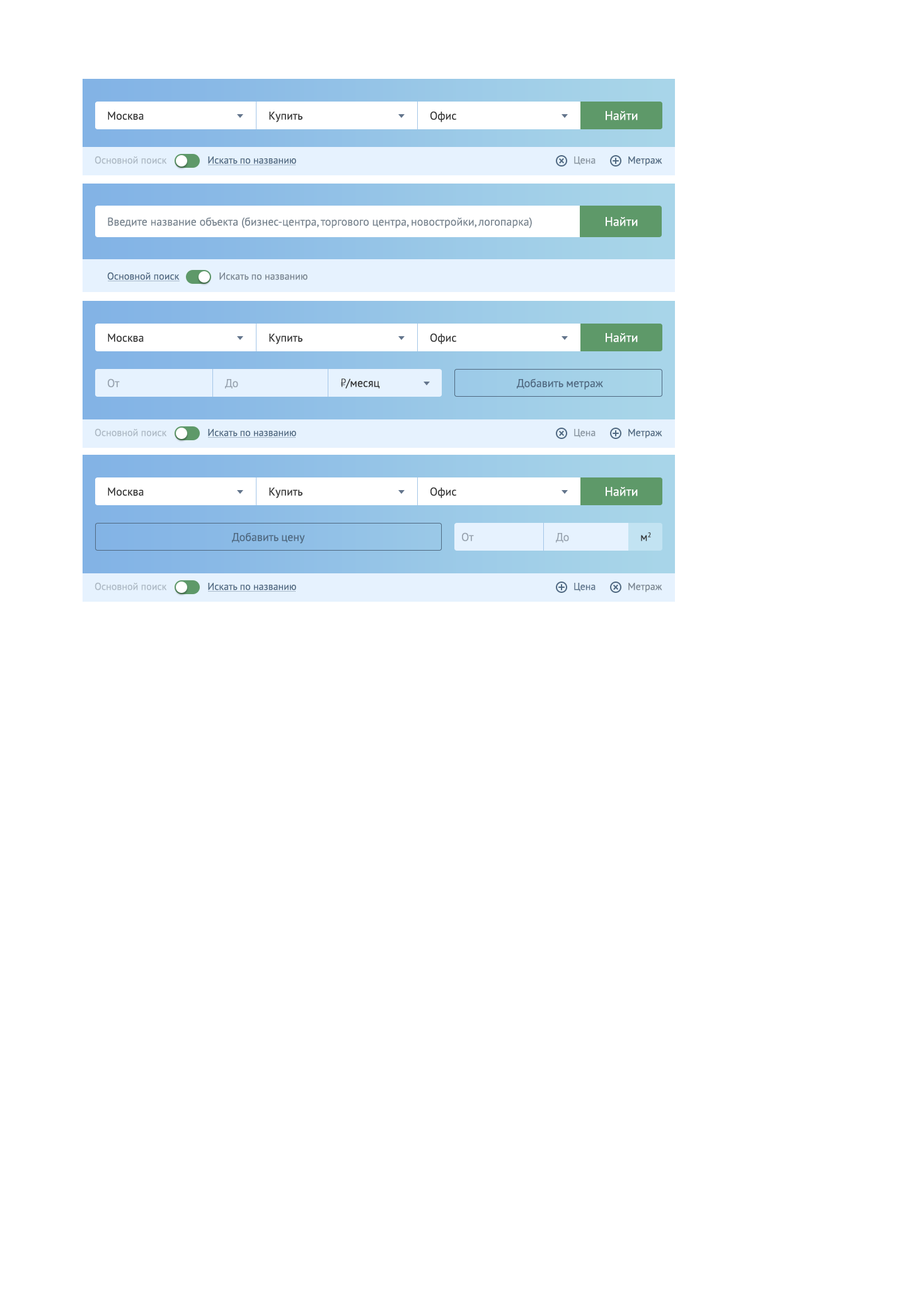
<style>
.page{position:relative;width:922px;height:1293px;background:#ffffff}
.page>*{position:absolute;margin:0}
.t1{font:11.3px "PTSans-Regular";color:#333333}
.t2{font:12.6px "PTSans-Regular";color:#ffffff}
.t3{font:10.1px "PTSans-Regular";color:#adb9c4}
.t4{font:10.1px "PTSans-Regular";color:#506981}
.t5{font:10.1px "PTSans-Regular";color:#88949f}
.t6{font:11.3px "PTSans-Regular";color:#798590}
.t7{font:10.1px "PTSans-Regular";color:#798590}
.t8{font:11.3px "PTSans-Regular";color:#98a3af}
.t9{font:11.3px "PTRoubleSans";color:#333333}
.t10{font:11.3px "PTSans-Regular";color:#506981}
.t11{font:10.1px "PTSans-Regular";color:#5c738a}
</style>
<div class="page">
<p class="t1" style="left:108px;top:112px;width:36px;height:8px">Москва</p>
<p class="t1" style="left:269px;top:112px;width:34px;height:10px">Купить</p>
<p class="t1" style="left:431px;top:111px;width:26px;height:11px">Офис</p>
<p class="t2" style="left:606px;top:111px;width:32px;height:9px">Найти</p>
<p class="t3" style="left:95px;top:156px;width:72px;height:8px">Основной поиск</p>
<p class="t4" style="left:208px;top:156px;width:88px;height:8px">Искать по названию</p>
<p class="t5" style="left:574px;top:156px;width:22px;height:9px">Цена</p>
<p class="t4" style="left:629px;top:156px;width:34px;height:10px">Метраж</p>
<p class="t6" style="left:108px;top:217px;width:424px;height:11px">Введите название объекта (бизнес-центра, торгового центра, новостройки, логопарка)</p>
<p class="t2" style="left:606px;top:217px;width:32px;height:9px">Найти</p>
<p class="t4" style="left:107px;top:272px;width:73px;height:8px">Основной поиск</p>
<p class="t7" style="left:219px;top:272px;width:89px;height:8px">Искать по названию</p>
<p class="t1" style="left:108px;top:334px;width:36px;height:8px">Москва</p>
<p class="t1" style="left:269px;top:334px;width:34px;height:10px">Купить</p>
<p class="t1" style="left:431px;top:333px;width:26px;height:11px">Офис</p>
<p class="t2" style="left:606px;top:333px;width:32px;height:9px">Найти</p>
<p class="t8" style="left:108px;top:378px;width:12px;height:9px">От</p>
<p class="t8" style="left:225px;top:379px;width:13px;height:9px">До</p>
<p class="t1" style="left:341px;top:378px;width:39px;height:10px"><span class="t9">Р</span>/месяц</p>
<p class="t10" style="left:517px;top:378px;width:86px;height:12px">Добавить метраж</p>
<p class="t3" style="left:95px;top:428px;width:72px;height:8px">Основной поиск</p>
<p class="t4" style="left:208px;top:429px;width:88px;height:7px">Искать по названию</p>
<p class="t5" style="left:574px;top:429px;width:22px;height:9px">Цена</p>
<p class="t4" style="left:629px;top:429px;width:34px;height:9px">Метраж</p>
<p class="t1" style="left:108px;top:487px;width:36px;height:9px">Москва</p>
<p class="t1" style="left:269px;top:487px;width:34px;height:11px">Купить</p>
<p class="t1" style="left:431px;top:487px;width:26px;height:11px">Офис</p>
<p class="t2" style="left:606px;top:487px;width:32px;height:9px">Найти</p>
<p class="t10" style="left:232px;top:532px;width:73px;height:12px">Добавить цену</p>
<p class="t8" style="left:462px;top:532px;width:12px;height:9px">От</p>
<p class="t8" style="left:556px;top:533px;width:13px;height:10px">До</p>
<p class="t1" style="left:641px;top:532px;width:10px;height:9px">м2</p>
<p class="t3" style="left:95px;top:582px;width:72px;height:8px">Основной поиск</p>
<p class="t4" style="left:208px;top:583px;width:88px;height:7px">Искать по названию</p>
<p class="t11" style="left:574px;top:583px;width:22px;height:8px">Цена</p>
<p class="t7" style="left:629px;top:583px;width:34px;height:9px">Метраж</p>
</div>
